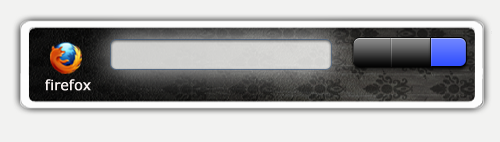
<style>
.page{position:relative;width:500px;height:142px;background:#f2f2f1}
.page>*{position:absolute;margin:0}
.t1{font:14px "Verdana";letter-spacing:-0.01em;color:#f9f2f2;font-weight:bold}
</style>
<div class="page">
<p class="t1" style="left:45px;top:79px;width:46px;height:12px">firefox</p>
</div>
